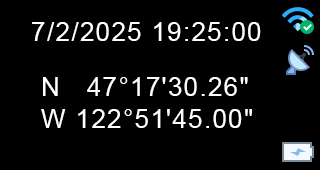
<style>
.page{position:relative;width:320px;height:170px;background:#000000}
.page>*{position:absolute;margin:0}
.t1{font:26px "ArialMT";letter-spacing:0.05em;color:#ffffff}
</style>
<div class="page">
<p class="t1" style="left:32px;top:22px;width:229px;height:19px">7/2/2025 19:25:00</p>
<p class="t1" style="left:41px;top:77px;width:211px;height:51px">N   47°17'30.26"<br>W 122°51'45.00"</p>
</div>
